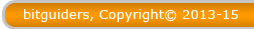
<style>
.page{position:relative;width:254px;height:29px}
.page>*{position:absolute;margin:0}
.t1{font:13.3px "Verdana";color:#fefdfd}
</style>
<div class="page">
<p class="t1" style="left:24px;top:9px;width:214px;height:13px">bitguiders, Copyright© 2013-15</p>
</div>
